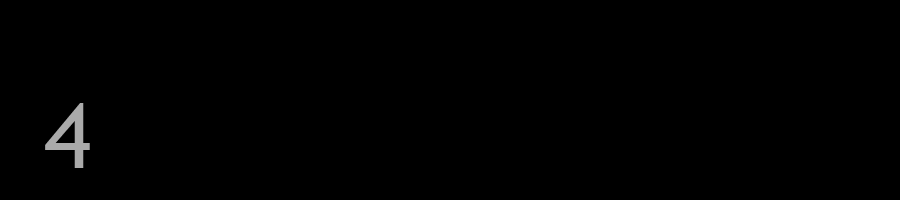
<style>
.page{position:relative;width:900px;height:200px;background:#000000}
.page>*{position:absolute;margin:0}
.t1{font:91px "TrebuchetMS";color:#aaaaaa}
</style>
<div class="page">
<p class="t1" style="left:45px;top:103px;width:45px;height:65px">4</p>
</div>
